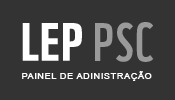
<style>
.page{position:relative;width:175px;height:100px;background:#333333}
.page>*{position:absolute;margin:0}
.t1{font:51.5px "WWF";letter-spacing:0.025em;color:#ffffff;font-weight:bold}
.t2{font:52.4px "WWF";letter-spacing:0.025em;color:#9a9a9a;text-transform:uppercase}
.t3{font:8.3px "ArialMT";letter-spacing:0.05em;color:#ffffff;font-weight:bold;scale:1.08 1}
</style>
<div class="page">
<p class="t1" style="left:22px;top:23px;width:60px;height:38px">LEP</p>
<p class="t2" style="left:95px;top:22px;width:59px;height:40px">PSC</p>
<p class="t3" style="left:22px;top:71px;width:130px;height:10px">PAINEL DE ADINISTRAÇÃO</p>
</div>
